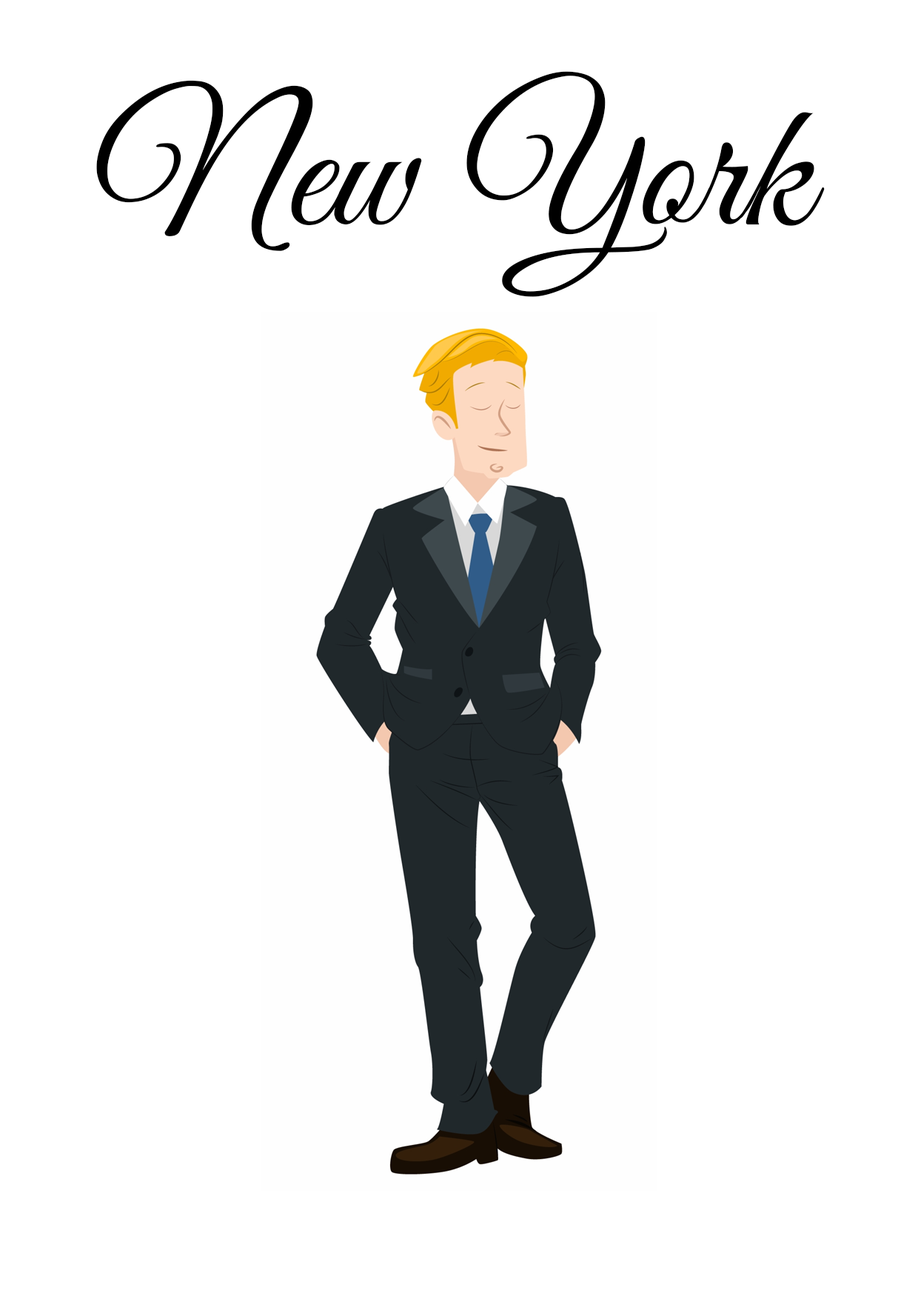
<style>
.page{position:relative;width:918px;height:1299px;background:#ffffff}
.page>*{position:absolute;margin:0}
.t1{font:181.3px "GreatVibes-Regular";color:#000000}
</style>
<div class="page">
<p class="t1" style="left:96px;top:71px;width:729px;height:226px">New York</p>
</div>
